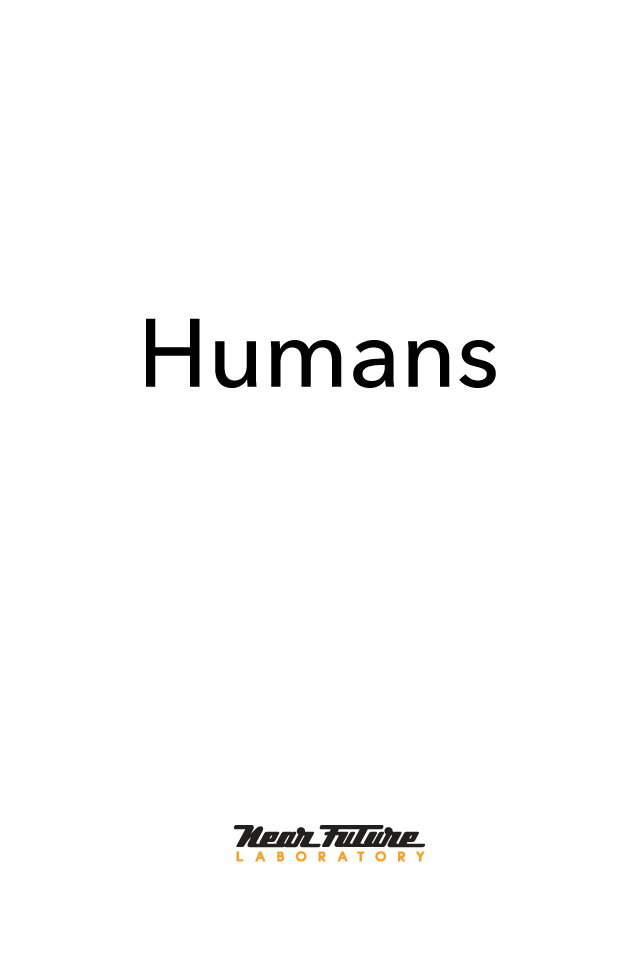
<style>
.page{position:relative;width:640px;height:960px;background:#ffffff}
.page>*{position:absolute;margin:0}
.t1{font:96px "AvenirNext-Medium";color:#000000}
</style>
<div class="page">
<p class="t1" style="left:146px;top:318px;width:350px;height:70px">Humans</p>
</div>
